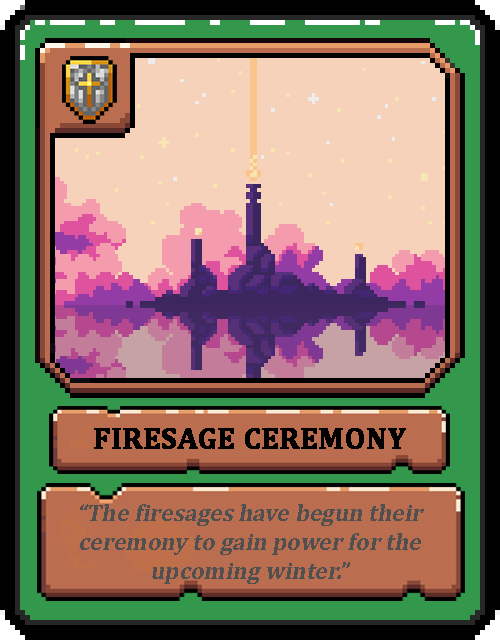
<style>
.page{position:relative;width:500px;height:640px}
.page>*{position:absolute;margin:0}
.t1{font:30px "Cambria-Bold";color:#000000;text-transform:uppercase;font-weight:bold}
.t2{font:24px "Cambria-Bold";color:#505050;font-style:italic}
</style>
<div class="page">
<p class="t1" style="left:94px;top:428px;width:312px;height:21px">Firesage Ceremony</p>
<p class="t2" style="left:80px;top:504px;width:344px;height:80px;text-align:center">“The firesages have begun their ceremony to gain power for the upcoming winter.”</p>
</div>
